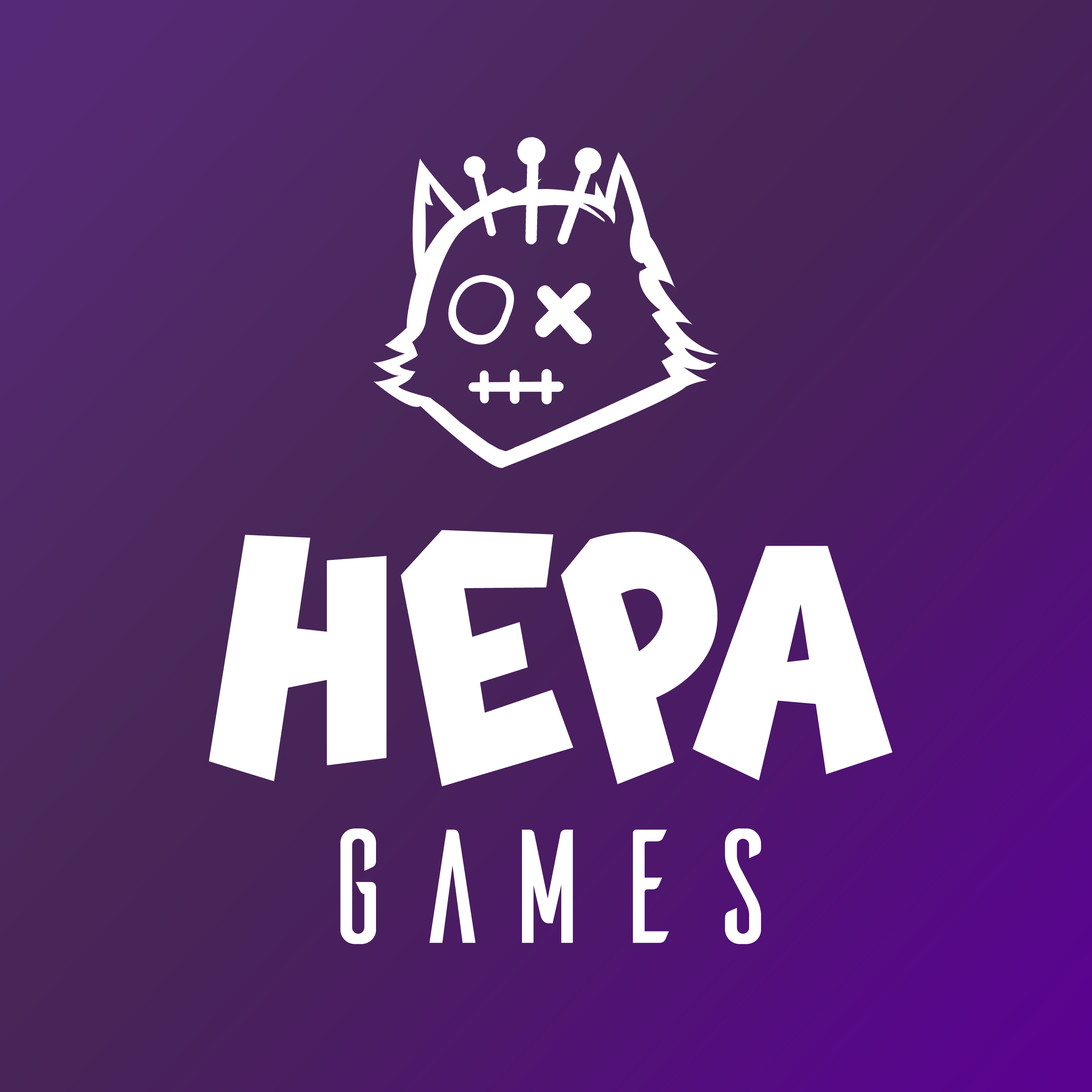
<style>
.page{position:relative;width:1092px;height:1092px}
.page>*{position:absolute;margin:0}
.t1{font:161.7px/158.7px "Ailerons-Regular";color:#ffffff}
.t2{font:369.8px/158.7px "DailyHours";color:#ffffff}
</style>
<div class="page">
<p class="t1" style="left:209px;top:530px;width:684px;height:414px;text-align:center"><span class="t2">HEPA<br></span>GAMES</p>
</div>
